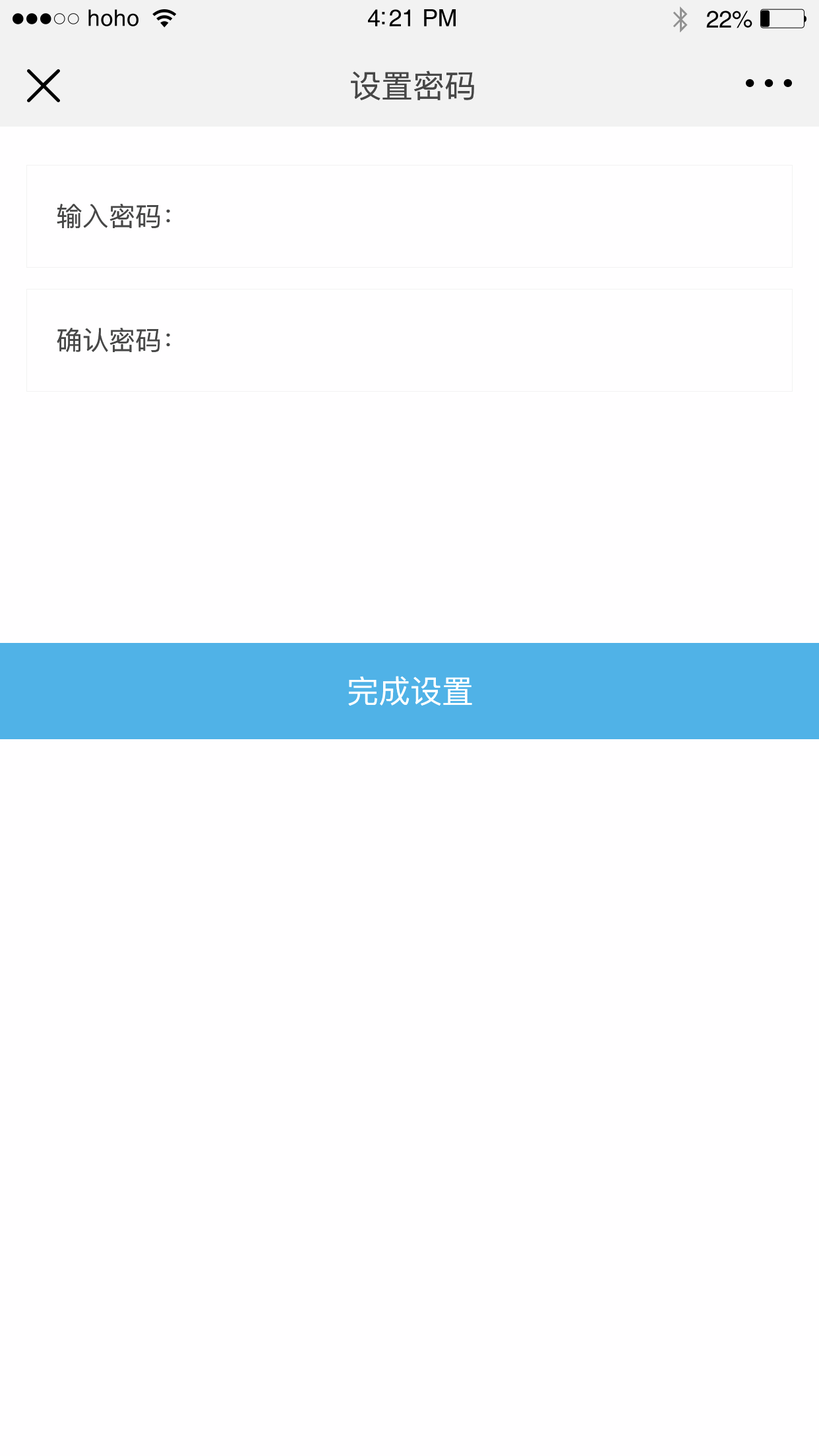
<style>
.page{position:relative;width:819px;height:1456px;background:#fffeff}
.page>*{position:absolute;margin:0}
.t1{font:22.8px "Helvetica";letter-spacing:0.02em;color:#000000}
.t2{font:23.8px "Helvetica";letter-spacing:-0.02em;color:#000000}
.t3{font:31.7px "PingFang-SC-Medium";color:#474747}
.t4{font:26.4px "PingFang-SC-Medium";color:#474747}
.t5{font:31.7px "PingFang-SC-Medium";color:#ffffff}
</style>
<div class="page">
<p class="t1" style="left:88px;top:9px;width:50px;height:17px">hoho</p>
<p class="t2" style="left:368px;top:9px;width:88px;height:17px">4:21 PM</p>
<p class="t2" style="left:706px;top:11px;width:46px;height:17px">22%</p>
<p class="t3" style="left:351px;top:71px;width:123px;height:29px">设置密码</p>
<p class="t4" style="left:57px;top:204px;width:113px;height:24px">输入密码：</p>
<p class="t4" style="left:57px;top:328px;width:113px;height:24px">确认密码：</p>
<p class="t5" style="left:348px;top:676px;width:124px;height:30px">完成设置</p>
</div>
